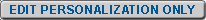
<style>
.page{position:relative;width:206px;height:20px;background:#cccccc}
.page>*{position:absolute;margin:0}
.t1{font:12px "Arial-BoldMT";letter-spacing:0.06em;color:#005596}
</style>
<div class="page">
<p class="t1" style="left:10px;top:5px;width:185px;height:9px">EDIT PERSONALIZATION ONLY</p>
</div>
